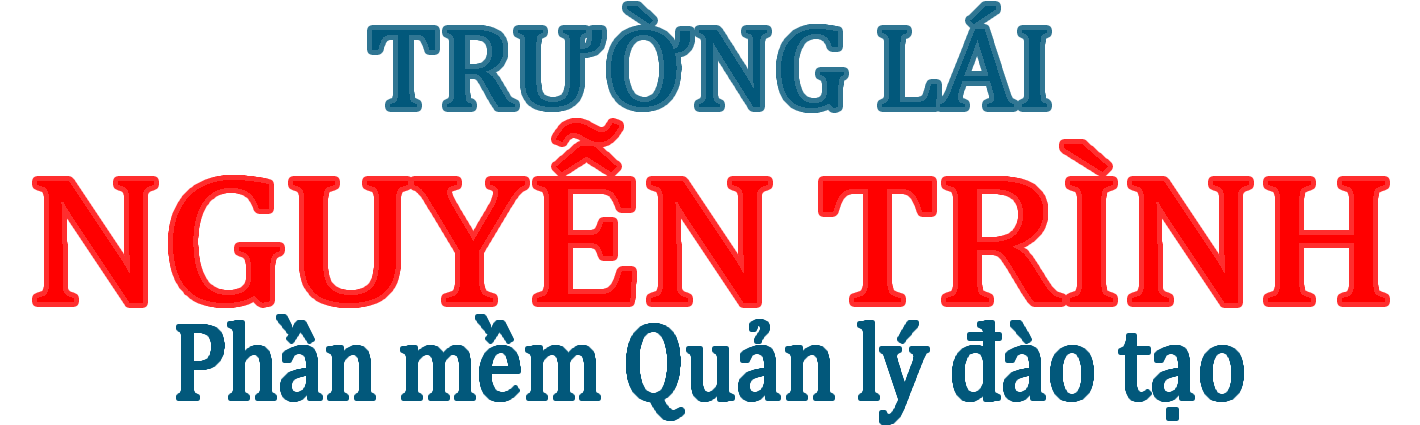
<style>
.page{position:relative;width:1420px;height:425px;background:#ffffff}
.page>*{position:absolute;margin:0}
.t1{font:115.6px "CambriaMath";color:#02587b;scale:1.05 1}
.t2{font:181.9px "CambriaMath";letter-spacing:-0.02em;color:#ff0000;scale:1.13 1}
.t3{font:109.5px "CambriaMath";color:#02587b;scale:0.86 1}
</style>
<div class="page">
<p class="t1" style="left:372px;top:6px;width:675px;height:102px">TRƯỜNG LÁI</p>
<p class="t2" style="left:37px;top:123px;width:1348px;height:180px">NGUYỄN TRÌNH</p>
<p class="t3" style="left:178px;top:316px;width:1064px;height:107px">Phần mềm Quản lý đào tạo</p>
</div>
